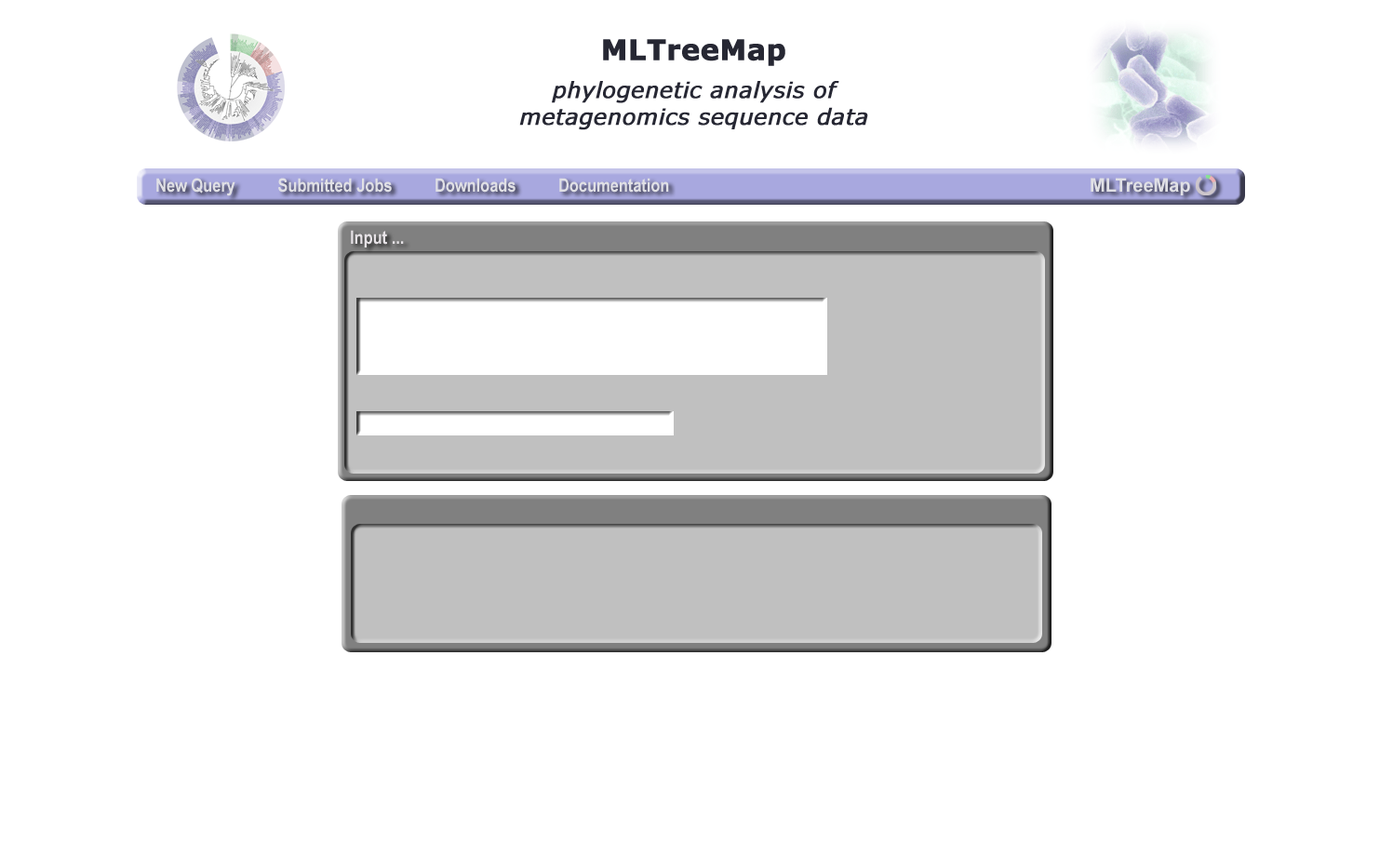
<style>
.page{position:relative;width:1393px;height:856px;background:#ffffff}
.page>*{position:absolute;margin:0}
.t1{font:18.6px "ArialNarrow-Bold";color:#e0e0e5}
.t2{font:18.6px "Arial-BoldMT";color:#e0e0e5}
.t3{font:18.6px "ArialNarrow-Bold";color:#e6e2e6}
</style>
<div class="page">
<p class="t1" style="left:156px;top:178px;width:513px;height:18px">New Query          Submitted Jobs          Downloads          Documentation</p>
<p class="t2" style="left:1091px;top:178px;width:99px;height:17px">MLTreeMap</p>
<p class="t3" style="left:351px;top:230px;width:53px;height:18px">Input ...</p>
</div>
